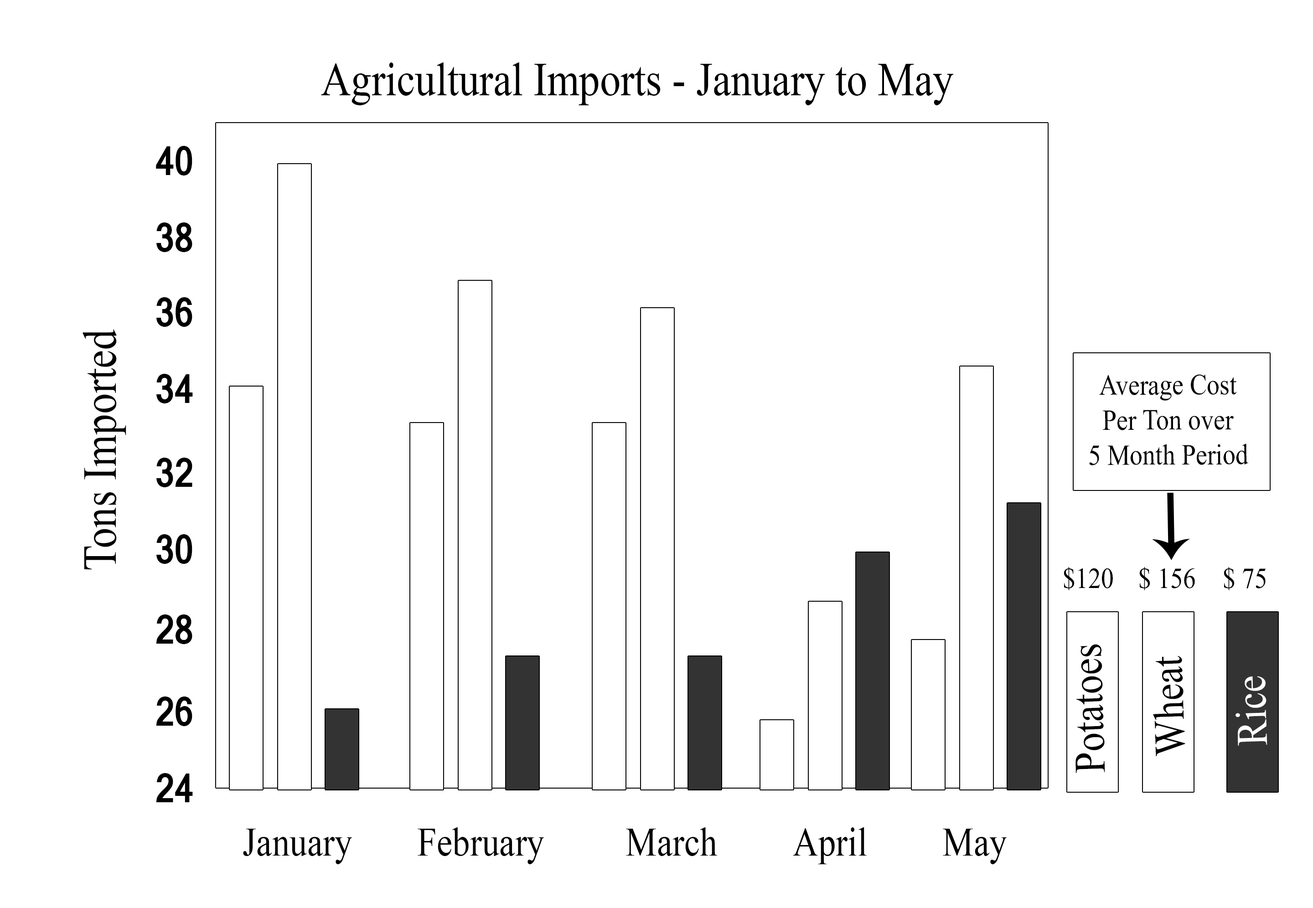
<style>
.page{position:relative;width:1313px;height:908px;background:#ffffff}
.page>*{position:absolute;margin:0}
.t1{font:47.5px "TimesNewRomanPSMT";color:#000000;scale:0.87 1}
.t2{font:76px "Vrinda-Bold";color:#000000;font-variant:small-caps;scale:0.87 1}
.t3{font:47.7px "TimesNewRomanPSMT";color:#000000;scale:0.87 1}
.t4{font:29.2px "TimesNewRomanPSMT";color:#000000;scale:0.87 1}
.t5{font:43.8px "TimesNewRomanPSMT";color:#000000;scale:0.87 1}
.t6{font:43.8px "TimesNewRomanPSMT";color:#ffffff;scale:0.87 1}
.t7{font:40.4px "TimesNewRomanPSMT";color:#000000;scale:0.87 1}
</style>
<div class="page">
<p class="t1" style="left:321px;top:62px;width:632px;height:43px">Agricultural Imports - January to May</p>
<p class="t2" style="left:156px;top:146px;width:36px;height:30px">40</p>
<p class="t2" style="left:156px;top:222px;width:36px;height:30px">38</p>
<p class="t2" style="left:156px;top:297px;width:36px;height:30px">36</p>
<p class="t3" style="left:83px;top:329px;width:43px;height:241px;rotate:-90deg">Tons Imported</p>
<p class="t2" style="left:156px;top:374px;width:37px;height:29px">34</p>
<p class="t4" style="left:1089px;top:374px;width:160px;height:91px;text-align:center">Average Cost<br>Per Ton over<br>5 Month Period</p>
<p class="t2" style="left:156px;top:458px;width:36px;height:29px">32</p>
<p class="t2" style="left:156px;top:534px;width:36px;height:30px">30</p>
<p class="t4" style="left:1064px;top:567px;width:49px;height:23px">$120</p>
<p class="t4" style="left:1139px;top:567px;width:56px;height:23px">$ 156</p>
<p class="t4" style="left:1224px;top:567px;width:42px;height:23px">$ 75</p>
<p class="t2" style="left:156px;top:615px;width:36px;height:29px">28</p>
<p class="t5" style="left:1075px;top:644px;width:30px;height:129px;rotate:-92deg">Potatoes</p>
<p class="t5" style="left:1153px;top:656px;width:32px;height:100px;rotate:-92deg">Wheat</p>
<p class="t6" style="left:1236px;top:676px;width:31px;height:70px;rotate:-92deg">Rice</p>
<p class="t2" style="left:156px;top:697px;width:36px;height:29px">26</p>
<p class="t2" style="left:156px;top:773px;width:37px;height:29px">24</p>
<p class="t7" style="left:243px;top:829px;width:109px;height:35px">January</p>
<p class="t7" style="left:418px;top:827px;width:126px;height:37px">February</p>
<p class="t7" style="left:626px;top:827px;width:92px;height:29px">March</p>
<p class="t7" style="left:793px;top:827px;width:74px;height:37px">April</p>
<p class="t7" style="left:943px;top:829px;width:64px;height:35px">May</p>
</div>
